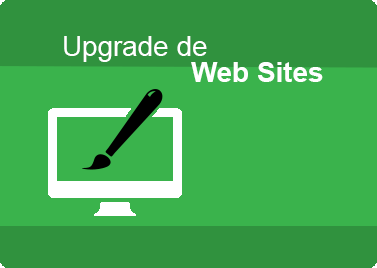
<style>
.page{position:relative;width:377px;height:268px;background:#3ab34c}
.page>*{position:absolute;margin:0}
.t1{font:27.8px "ArialMT";color:#ffffff}
.t2{font:27.8px "Arial-BoldMT";color:#ffffff}
</style>
<div class="page">
<p class="t1" style="left:64px;top:36px;width:143px;height:26px">Upgrade de</p>
<p class="t2" style="left:191px;top:62px;width:132px;height:20px">Web Sites</p>
</div>
